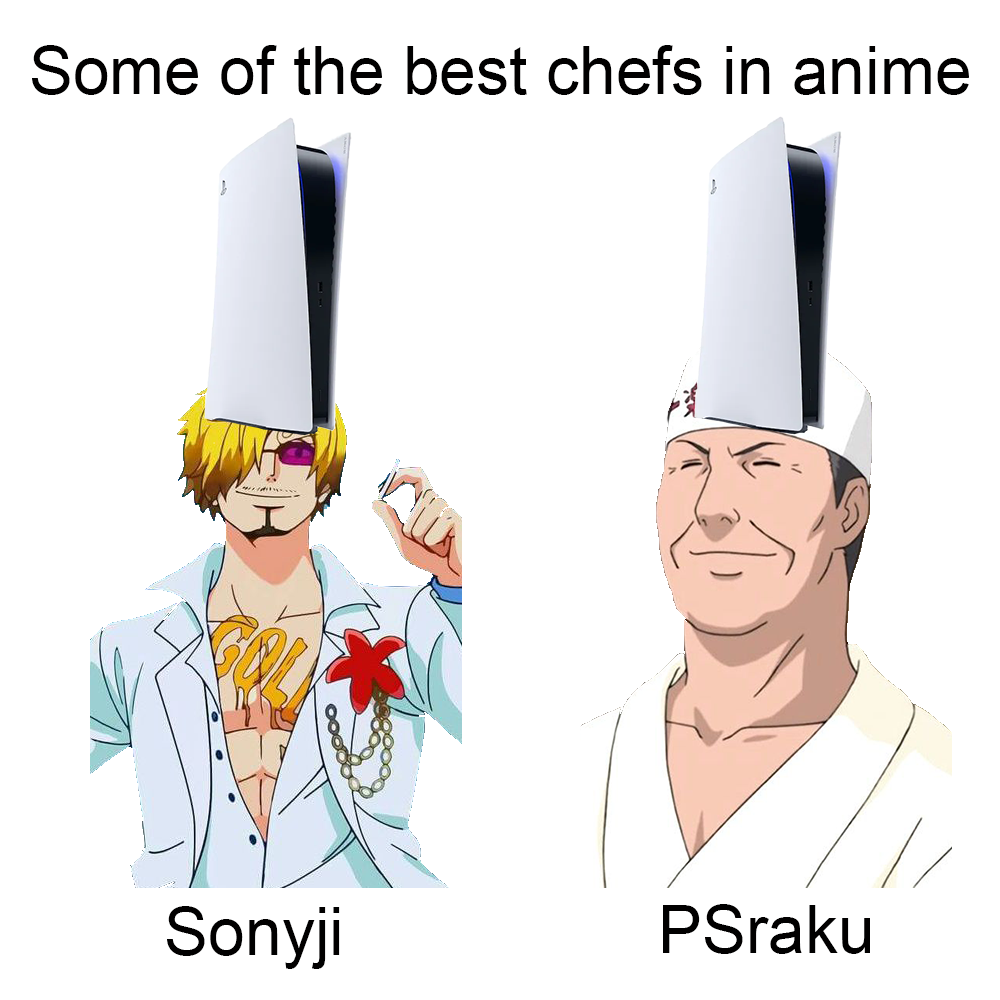
<style>
.page{position:relative;width:1000px;height:1000px;background:#ffffff}
.page>*{position:absolute;margin:0}
.t1{font:66px "ArialMT";color:#010000}
</style>
<div class="page">
<p class="t1" style="left:32px;top:45px;width:937px;height:50px">Some of the best chefs in anime</p>
<p class="t1" style="left:663px;top:904px;width:207px;height:50px">PSraku</p>
<p class="t1" style="left:167px;top:906px;width:173px;height:63px">Sonyji</p>
</div>
